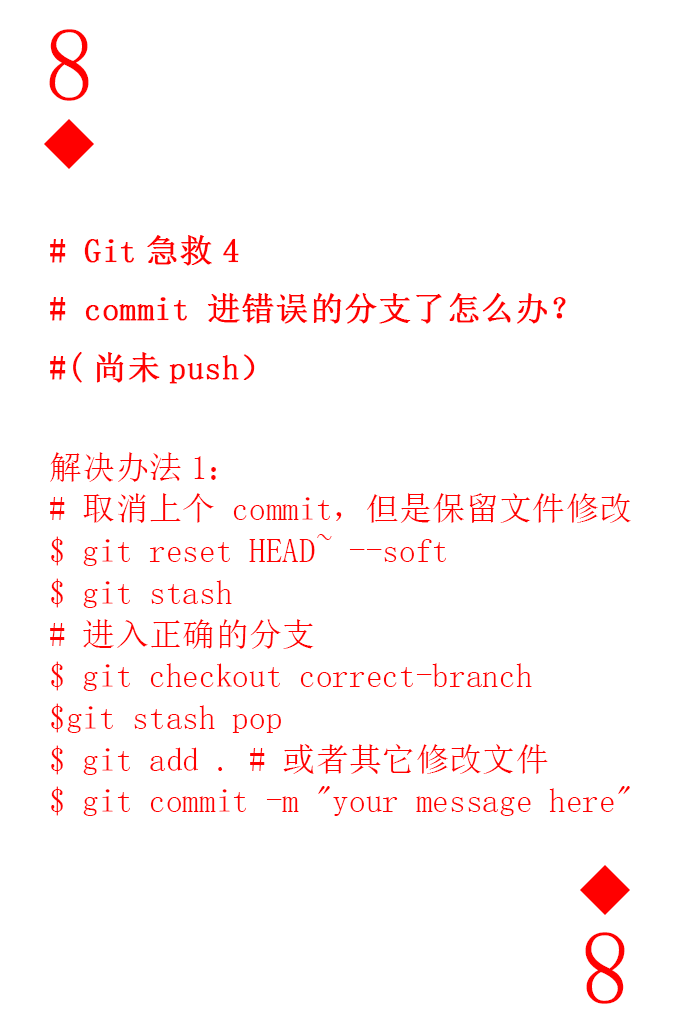
<style>
.page{position:relative;width:673px;height:1028px;background:#ffffff}
.page>*{position:absolute;margin:0}
.t1{font:104.2px "SimSun-ExtB";color:#ff0101;scale:0.93 1}
.t2{font:33.3px/41.7px "SimSun";color:#ff0101}
.t3{font:33.3px "SimSun";color:#ff0101;font-weight:bold}
</style>
<div class="page">
<p class="t1" style="left:49px;top:29px;width:40px;height:72px">8</p>
<p class="t2" style="left:50px;top:235px;width:581px;height:581px"><span class="t3"># Git急救4<br># commit 进错误的分支了怎么办？<br>#(尚未push）<br></span><br>解决办法1：<br># 取消上个 commit，但是保留文件修改<br>$ git reset HEAD~ --soft<br>$ git stash<br># 进入正确的分支<br>$ git checkout correct-branch<br>$git stash pop<br>$ git add . # 或者其它修改文件<br>$ git commit -m "your message here"</p>
<p class="t1" style="left:585px;top:932px;width:40px;height:72px;rotate:180deg">8</p>
</div>
